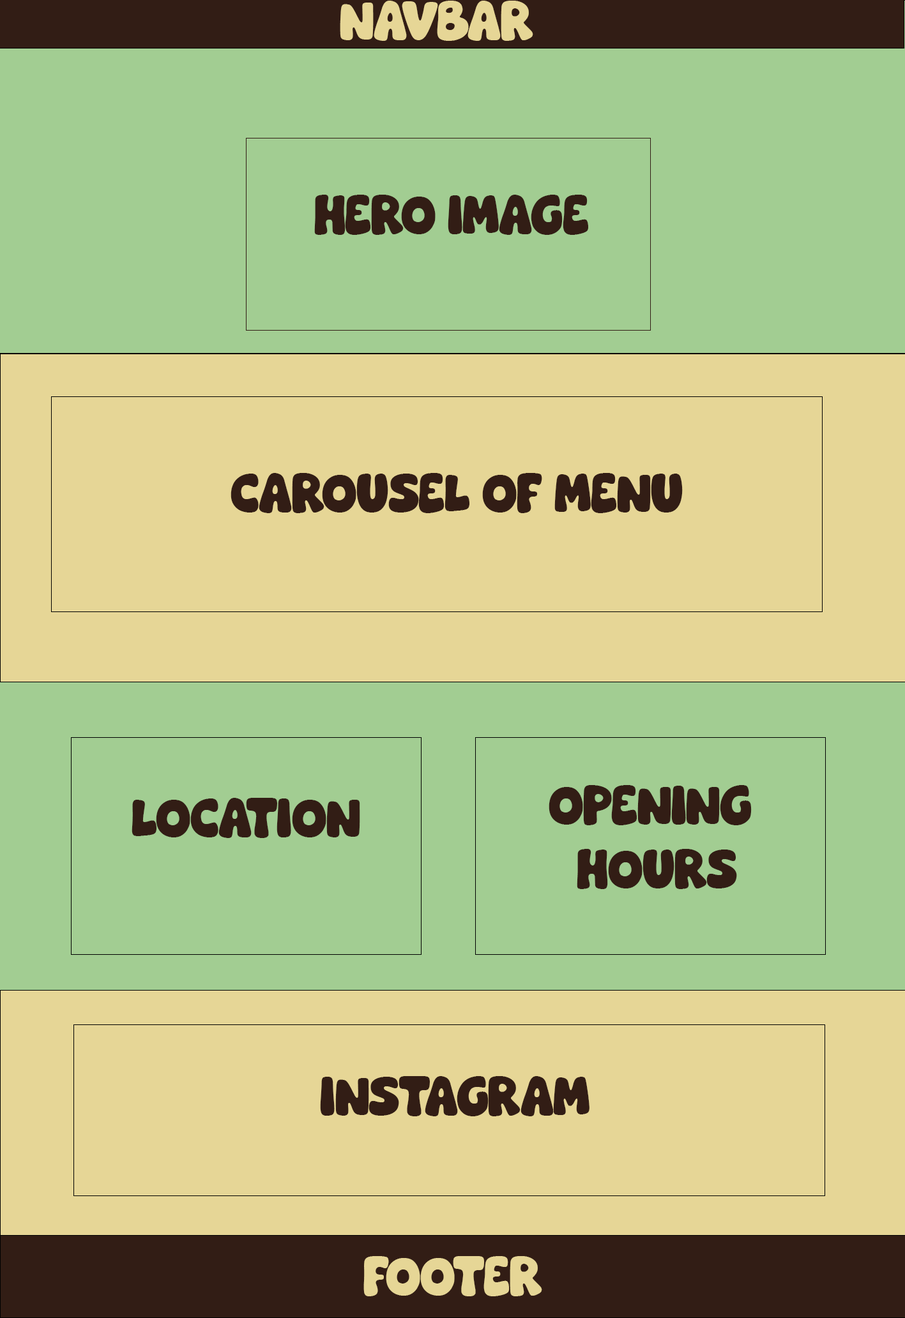
<style>
.page{position:relative;width:905px;height:1318px;background:#a2cd92}
.page>*{position:absolute;margin:0}
.t1{font:95.8px "GloomieSaturday";letter-spacing:-0.025em;color:#e6d696}
.t2{font:95.8px/63.8px "GloomieSaturday";letter-spacing:-0.025em;color:#321d15}
.t3{font:95.8px "GloomieSaturday";letter-spacing:-0.025em;color:#321d15}
</style>
<div class="page">
<p class="t1" style="left:340px;top:1px;width:193px;height:40px">Navbar</p>
<p class="t2" style="left:314px;top:195px;width:274px;height:40px;text-align:center">Hero Image<br><br>lLo/ Lo<br>logo</p>
<p class="t3" style="left:230px;top:473px;width:452px;height:40px">Carousel of menu</p>
<p class="t2" style="left:548px;top:785px;width:203px;height:104px;text-align:center">Opening <br>hours</p>
<p class="t3" style="left:132px;top:798px;width:228px;height:40px">Location</p>
<p class="t3" style="left:320px;top:1076px;width:269px;height:41px">Instagram</p>
<p class="t1" style="left:363px;top:1256px;width:179px;height:41px">Footer</p>
</div>
